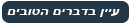
<style>
.page{position:relative;width:130px;height:24px;background:#233645}
.page>*{position:absolute;margin:0}
.t1{font:11.2px "Arial-BoldItalicMT";color:#fefefe;scale:1.25 1}
</style>
<div class="page">
<p class="t1" style="left:7px;top:9px;width:113px;height:8px">םיבוטה םירבדב ןייע</p>
</div>
